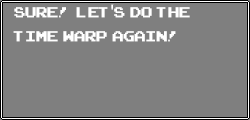
<style>
.page{position:relative;width:250px;height:120px;background:#7f7f7f}
.page>*{position:absolute;margin:0}
.t1{font:20px "ArcadeClassic";color:#ffffff}
.t2{font:20px "MyriadPro-Regular";color:#ffffff}
</style>
<div class="page">
<p class="t1" style="left:13px;top:4px;width:177px;height:38px">Sure!  let<span class="t2">'</span>s  do  the  <br>time  warp  again!</p>
</div>
